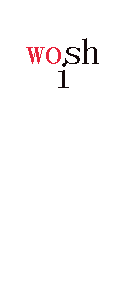
<style>
.page{position:relative;width:120px;height:300px;background:#ffffff}
.page>*{position:absolute;margin:0}
.t1{font:37.8px "YouYuan";letter-spacing:-0.01em;color:#14090a}
.t2{font:37.8px "YouYuan";letter-spacing:-0.01em;color:#e7223a}
</style>
<div class="page">
<p class="t1" style="left:26px;top:38px;width:73px;height:50px"><span class="t2">wo</span>shi</p>
</div>
